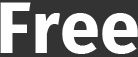
<style>
.page{position:relative;width:138px;height:57px;background:#333333}
.page>*{position:absolute;margin:0}
.t1{font:72px "FiraSans-Bold";color:#ffffff}
</style>
<div class="page">
<p class="t1" style="left:0px;top:2px;width:138px;height:52px">Free</p>
</div>
